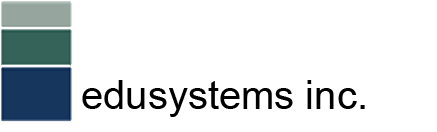
<style>
.page{position:relative;width:437px;height:132px;background:#ffffff}
.page>*{position:absolute;margin:0}
.t1{font:40px "ArialMT";color:#000000}
</style>
<div class="page">
<p class="t1" style="left:82px;top:80px;width:283px;height:37px">edusystems inc.</p>
</div>
